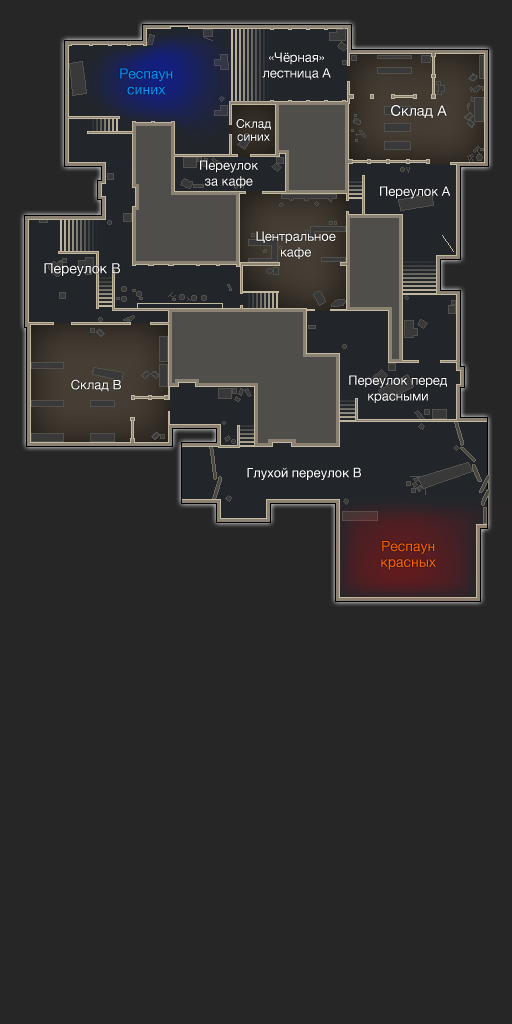
<style>
.page{position:relative;width:512px;height:1024px;background:#262626}
.page>*{position:absolute;margin:0}
.t1{font:13px/15.8px "HelveticaNeue";color:#ffffff}
.t2{font:14px/15.8px "HelveticaNeue";color:#0099ff}
.t3{font:14.5px "HelveticaNeue";color:#ffffff}
.t4{font:12px/13px "HelveticaNeue";color:#ffffff}
.t5{font:13px "HelveticaNeue";color:#ffffff}
.t6{font:14px "HelveticaNeue";color:#ffffff}
.t7{font:13px "Helvetica";color:#ffffff}
.t8{font:14px/15.8px "HelveticaNeue";color:#ff6600}
</style>
<div class="page">
<p class="t1" style="left:262px;top:52px;width:69px;height:28px;text-align:center">«Чёрная»<br>лестница А</p>
<p class="t2" style="left:120px;top:68px;width:53px;height:27px;text-align:center">Респаун<br>синих</p>
<p class="t3" style="left:391px;top:105px;width:56px;height:13px">Склад А</p>
<p class="t4" style="left:236px;top:119px;width:35px;height:22px;text-align:center">Склад<br>синих</p>
<p class="t1" style="left:200px;top:160px;width:59px;height:28px;text-align:center">Переулок<br>за кафе</p>
<p class="t5" style="left:380px;top:186px;width:71px;height:13px">Переулок А</p>
<p class="t1" style="left:256px;top:231px;width:80px;height:28px;text-align:center">Центральное<br>кафе</p>
<p class="t6" style="left:44px;top:263px;width:76px;height:13px">Переулок B</p>
<p class="t1" style="left:349px;top:375px;width:98px;height:28px;text-align:center">Переулок перед<br>красными</p>
<p class="t5" style="left:71px;top:379px;width:50px;height:13px">Склад B</p>
<p class="t7" style="left:247px;top:467px;width:114px;height:13px">Глухой переулок B</p>
<p class="t8" style="left:381px;top:541px;width:55px;height:29px;text-align:center">Респаун<br>красных</p>
</div>
